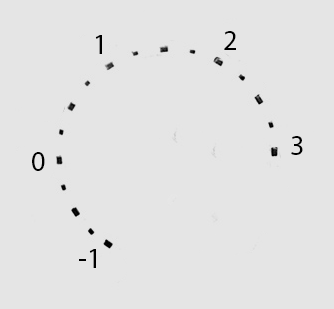
<style>
.page{position:relative;width:334px;height:309px;background:#e5e5e5}
.page>*{position:absolute;margin:0}
.t1{font:28px "MyriadPro-Regular";color:#000000}
</style>
<div class="page">
<p class="t1" style="left:95px;top:35px;width:7px;height:19px">1</p>
<p class="t1" style="left:224px;top:31px;width:12px;height:19px">2</p>
<p class="t1" style="left:291px;top:136px;width:12px;height:19px">3</p>
<p class="t1" style="left:32px;top:152px;width:13px;height:19px">0</p>
<p class="t1" style="left:79px;top:249px;width:17px;height:19px">-1</p>
</div>
